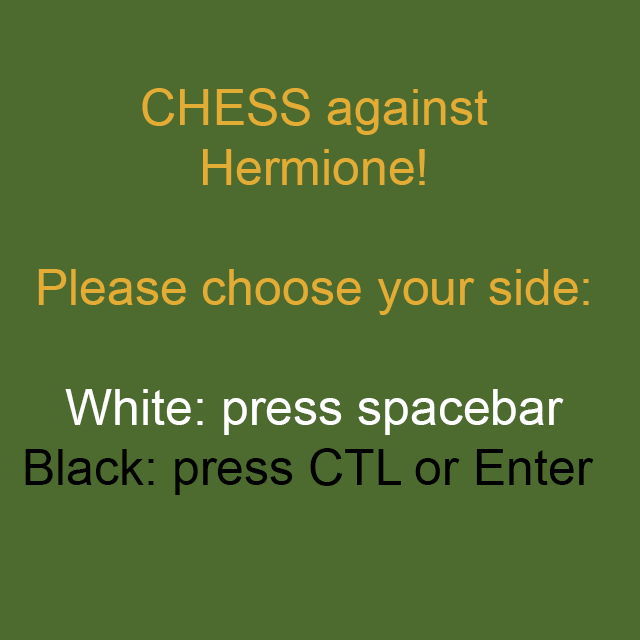
<style>
.page{position:relative;width:640px;height:640px;background:#4e6b2f}
.page>*{position:absolute;margin:0}
.t1{font:50px "ArialMT";color:#e3ac35}
.t2{font:50px "ArialMT";color:#ffffff}
.t3{font:50px "ArialMT";color:#000000}
</style>
<div class="page">
<p class="t1" style="left:25px;top:88px;width:569px;height:407px;text-align:center">CHESS against<br>Hermione!<br><br>Please choose your side:<br><span class="t2"><br>White: press spacebar<br></span><span class="t3">Black: press CTL or Enter</span></p>
</div>
